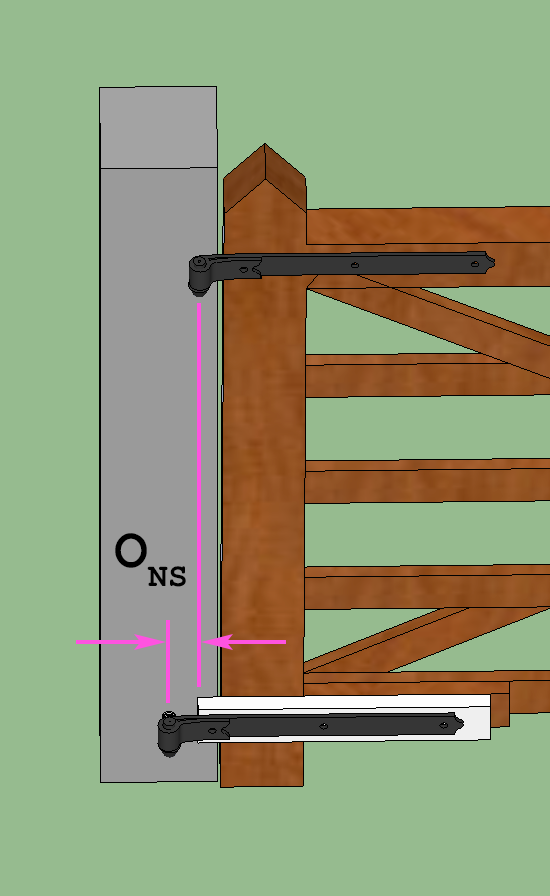
<style>
.page{position:relative;width:550px;height:896px;background:#96bb8f}
.page>*{position:absolute;margin:0}
.t1{font:56.7px "FreeMonoBold";color:#000000}
</style>
<div class="page">
<p class="t1" style="left:115px;top:533px;width:71px;height:54px">ONS</p>
</div>
